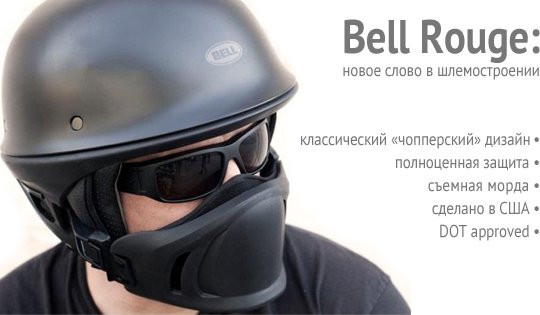
<style>
.page{position:relative;width:540px;height:315px;background:#ffffff}
.page>*{position:absolute;margin:0}
.t1{font:17.2px/23px "PTSans-Regular";letter-spacing:-0.01em;color:#777777;scale:0.87 1}
.t2{font:47.1px/21px "PTSans-Bold";letter-spacing:-0.01em;color:#777777;scale:0.87 1}
.t3{font:17.2px/23px "PTSans-Regular";letter-spacing:0.01em;color:#777777;scale:0.87 1}
</style>
<div class="page">
<p class="t1" style="left:301px;top:19px;width:239px;height:222px;text-align:right"><span class="t2">Bell Rouge:<br></span>новое слово в шлемостроении<br><br><br>классический «чопперский» дизайн •<br>полноценная защита •<br><span class="t3">съемная морда </span>•<br>сделано в США •<br>DOT approved •</p>
</div>
